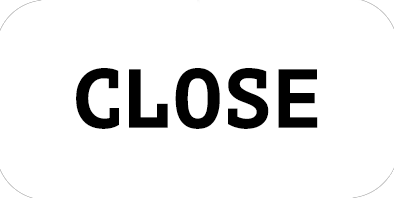
<style>
.page{position:relative;width:394px;height:198px;background:#ffffff}
.page>*{position:absolute;margin:0}
.t1{font:83.3px "PTMono-Bold";color:#000000}
</style>
<div class="page">
<p class="t1" style="left:76px;top:68px;width:242px;height:61px">CLOSE</p>
</div>
